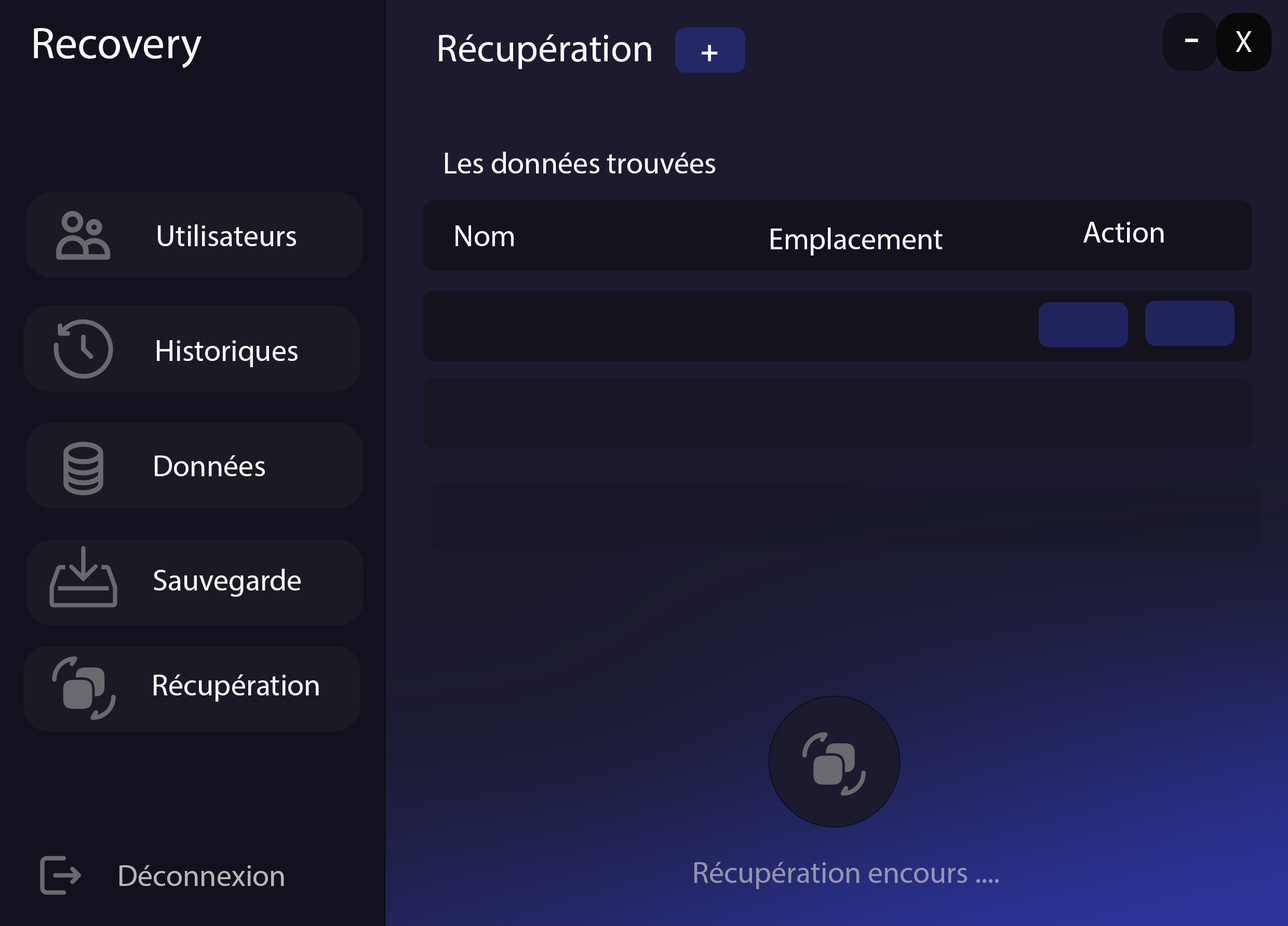
<style>
.page{position:relative;width:1288px;height:926px;background:#1b1a2f}
.page>*{position:absolute;margin:0}
.t1{font:44.8px "MyriadPro-Regular";color:#fcf9f9}
.t2{font:38.9px "MyriadPro-Regular";color:#fcf9f9}
.t3{font:51.9px "MyriadPro-Regular";color:#fcf9f9}
.t4{font:30.3px "MyriadPro-Regular";color:#fcf9f9}
.t5{font:30.3px "MyriadPro-Bold";color:#fcf9f9}
.t6{font:30.3px "MyriadPro-Regular";color:#b8b6b7}
.t7{font:30.3px "MyriadPro-Regular";color:#9494b1}
</style>
<div class="page">
<p class="t1" style="left:34px;top:28px;width:167px;height:40px">Recovery</p>
<p class="t2" style="left:439px;top:34px;width:212px;height:35px">Récupération</p>
<p class="t3" style="left:1185px;top:38px;width:13px;height:4px">-</p>
<p class="t4" style="left:1235px;top:31px;width:17px;height:21px">X</p>
<p class="t5" style="left:702px;top:45px;width:16px;height:16px">+</p>
<p class="t4" style="left:445px;top:152px;width:270px;height:21px">Les données trouvées</p>
<p class="t4" style="left:1083px;top:222px;width:81px;height:21px">Action</p>
<p class="t4" style="left:158px;top:224px;width:138px;height:22px">Utilisateurs</p>
<p class="t4" style="left:455px;top:225px;width:59px;height:21px">Nom</p>
<p class="t4" style="left:771px;top:227px;width:172px;height:28px">Emplacement</p>
<p class="t4" style="left:157px;top:340px;width:141px;height:27px">Historiques</p>
<p class="t4" style="left:155px;top:455px;width:110px;height:21px">Données</p>
<p class="t4" style="left:154px;top:569px;width:147px;height:28px">Sauvegarde</p>
<p class="t4" style="left:154px;top:674px;width:165px;height:28px">Récupération</p>
<p class="t6" style="left:119px;top:865px;width:165px;height:21px">Déconnexion</p>
<p class="t7" style="left:694px;top:862px;width:305px;height:27px">Récupération encours ....</p>
</div>
